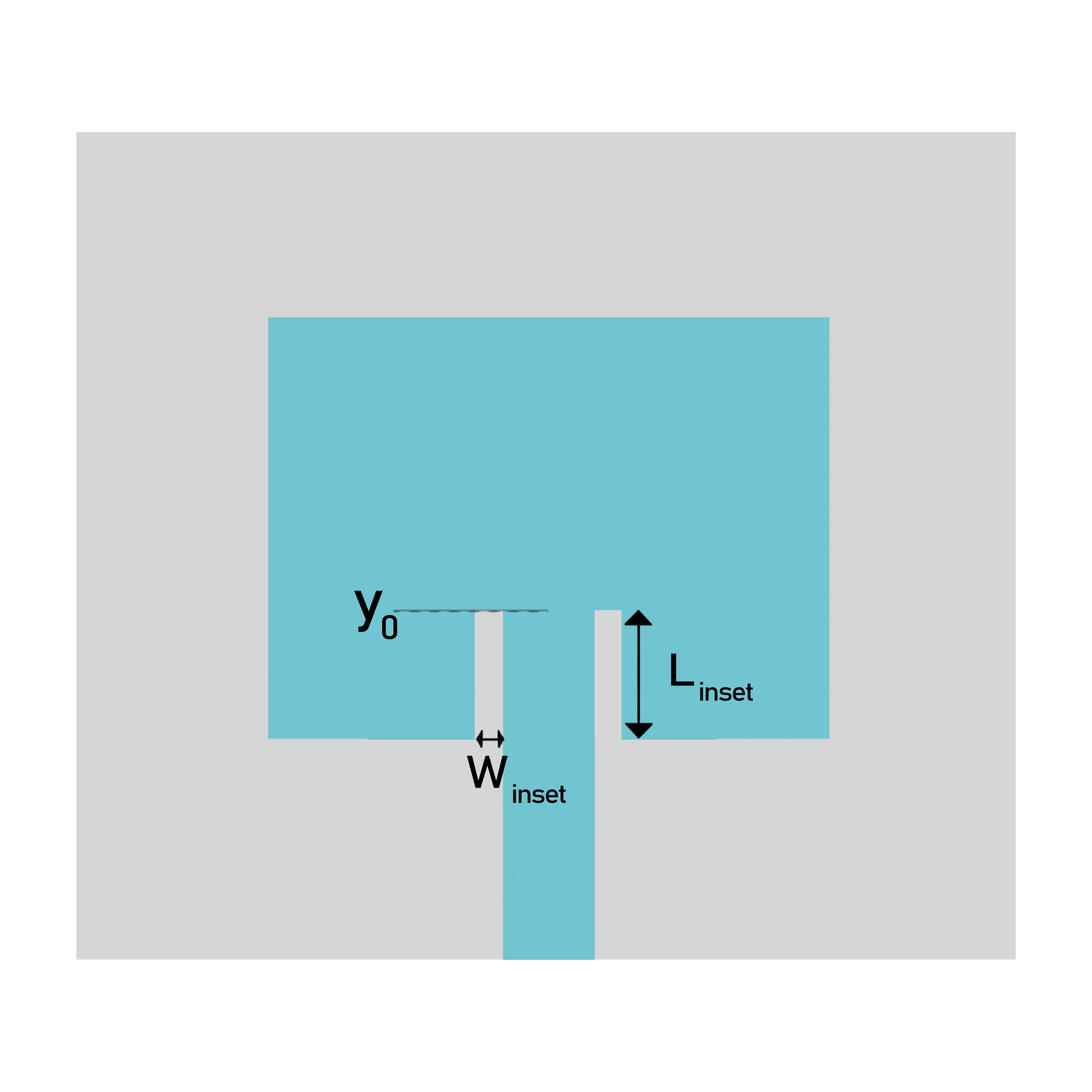
<style>
.page{position:relative;width:1092px;height:1092px;background:#d6d6d6}
.page>*{position:absolute;margin:0}
.t1{font:57.6px "Bahnschrift";letter-spacing:-0.06em;color:#000000;font-weight:bold;font-style:italic;scale:1.1 1}
.t2{font:45.1px "Bahnschrift";letter-spacing:-0.06em;color:#000000;font-weight:bold;font-style:italic;scale:1.1 1}
</style>
<div class="page">
<p class="t1" style="left:354px;top:591px;width:43px;height:49px">y0</p>
<p class="t2" style="left:671px;top:653px;width:82px;height:48px">L inset</p>
<p class="t2" style="left:467px;top:755px;width:99px;height:48px">W inset</p>
</div>
